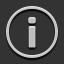
<style>
.page{position:relative;width:64px;height:64px;background:#333333}
.page>*{position:absolute;margin:0}
.t1{font:44.4px "Calibri-Bold";color:#bebebe;font-weight:bold}
</style>
<div class="page">
<p class="t1" style="left:28px;top:17px;width:8px;height:31px">i</p>
</div>
